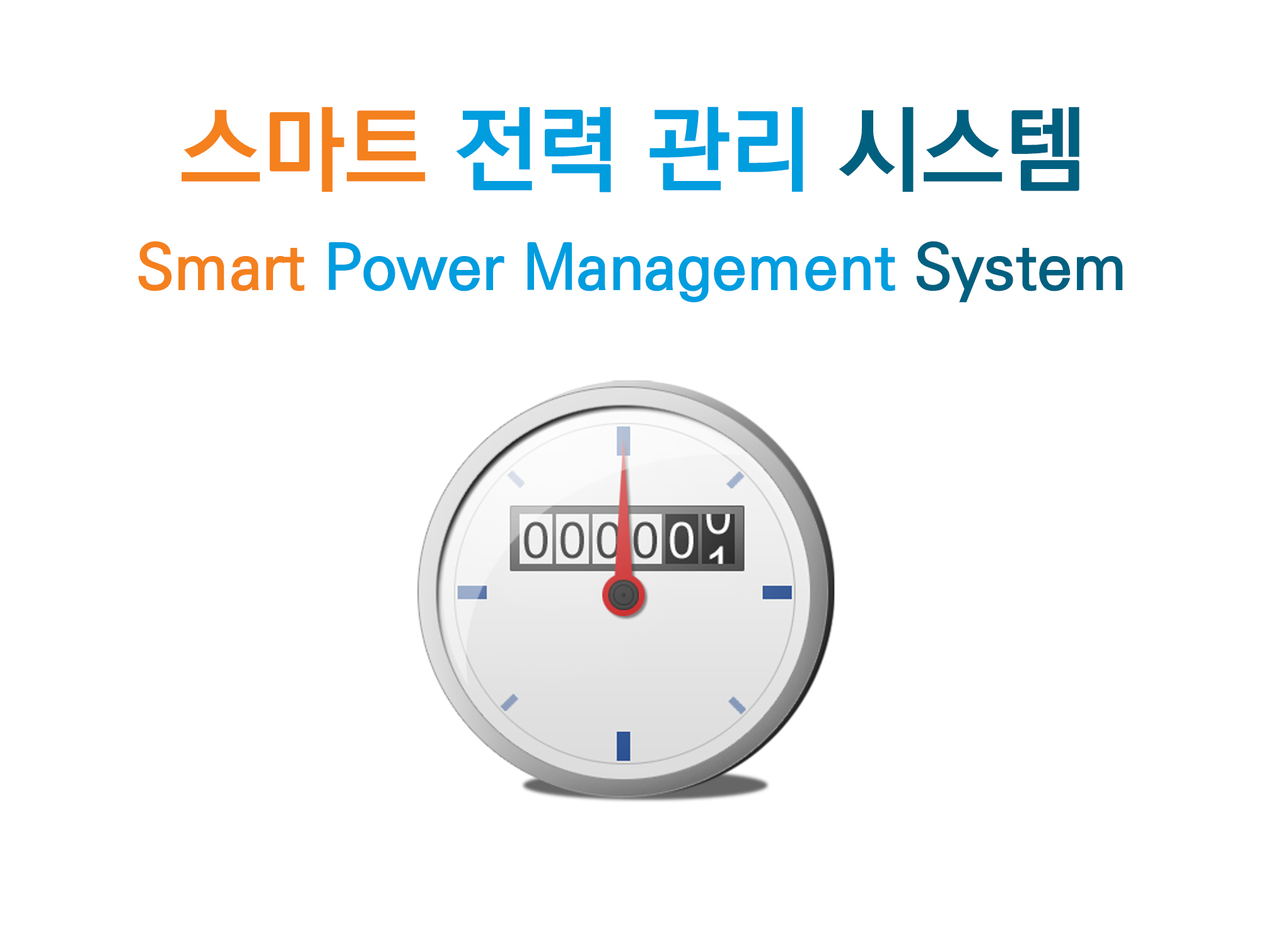
<style>
.page{position:relative;width:1261px;height:946px;background:#ffffff}
.page>*{position:absolute;margin:0}
.t1{font:94.6px "KoPubDotumBold";color:#009ddf}
.t2{font:94.6px "KoPubDotumBold";color:#f4801e}
.t3{font:94.6px "KoPubDotumBold";color:#006080}
.t4{font:63px "KoPubDotumBold";color:#009ddf}
.t5{font:63px "KoPubDotumBold";color:#f4801e}
.t6{font:63px "KoPubDotumBold";color:#006080}
</style>
<div class="page">
<p class="t1" style="left:182px;top:107px;width:897px;height:85px"><span class="t2">스마트 </span>전력 관리 <span class="t3">시스템</span></p>
<p class="t4" style="left:138px;top:241px;width:985px;height:62px"><span class="t5">Smart </span>Power Management <span class="t6">System</span></p>
</div>
